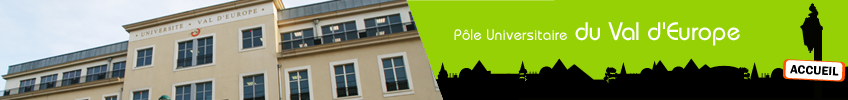
<style>
.page{position:relative;width:848px;height:100px;background:#96d105}
.page>*{position:absolute;margin:0}
.t1{font:15px "DynameSSK";color:#ffffff}
.t2{font:25px "DynameSSK";color:#ffffff}
</style>
<div class="page">
<p class="t1" style="left:454px;top:22px;width:286px;height:24px">Pôle Universitaire<span class="t2"> du Val d'Europe</span></p>
</div>
